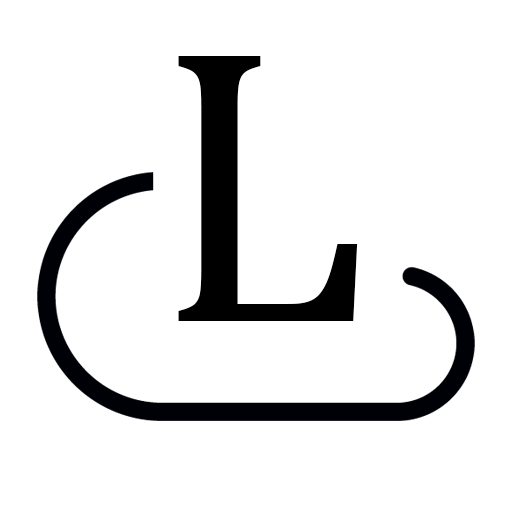
<style>
.page{position:relative;width:512px;height:512px;background:#ffffff}
.page>*{position:absolute;margin:0}
.t1{font:398px "Cambria";letter-spacing:0.015em;color:#000000}
</style>
<div class="page">
<p class="t1" style="left:178px;top:56px;width:180px;height:265px">L</p>
</div>
